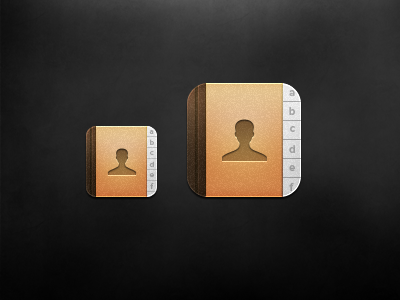
<style>
.page{position:relative;width:400px;height:300px}
.page>*{position:absolute;margin:0}
.t1{font:11px "ProximaNova-Bold";letter-spacing:0.05em;color:#a8a8a8}
.t2{font:11px "ProximaNova-Bold";letter-spacing:0.05em;color:#a4a4a4}
.t3{font:11px "ProximaNova-Bold";letter-spacing:0.05em;color:#a1a1a1}
.t4{font:8px "ProximaNova-Bold";letter-spacing:0.05em;color:#a5a5a5}
.t5{font:11px "ProximaNova-Bold";letter-spacing:0.05em;color:#9d9d9d}
.t6{font:8px "ProximaNova-Bold";letter-spacing:0.05em;color:#9c9c9c}
.t7{font:8px "ProximaNova-Bold";letter-spacing:0.05em}
.t8{font:8px "ProximaNova-Bold";letter-spacing:0.05em;color:#9a9a9a}
.t9{font:11px "ProximaNova-Bold";letter-spacing:0.05em;color:#999999}
.t10{font:8px "ProximaNova-Bold";letter-spacing:0.05em;color:#969696}
.t11{font:11px "ProximaNova-Bold";letter-spacing:0.05em;color:#989898}
</style>
<div class="page">
<p class="t1" style="left:289px;top:90px;width:6px;height:6px">a</p>
<p class="t2" style="left:289px;top:107px;width:6px;height:8px">b</p>
<p class="t3" style="left:290px;top:126px;width:5px;height:6px">c</p>
<p class="t4" style="left:149px;top:130px;width:5px;height:4px">a</p>
<p class="t4" style="left:150px;top:139px;width:4px;height:6px">b</p>
<p class="t5" style="left:289px;top:145px;width:6px;height:8px">d</p>
<p class="t6" style="left:149px;top:161px;width:5px;height:6px">d</p>
<p class="t7" style="left:150px;top:151px;width:4px;height:4px">c</p>
<p class="t8" style="left:149px;top:173px;width:5px;height:4px">e</p>
<p class="t9" style="left:289px;top:165px;width:6px;height:6px">e</p>
<p class="t10" style="left:150px;top:183px;width:4px;height:6px">f</p>
<p class="t11" style="left:289px;top:183px;width:5px;height:8px">f</p>
</div>
